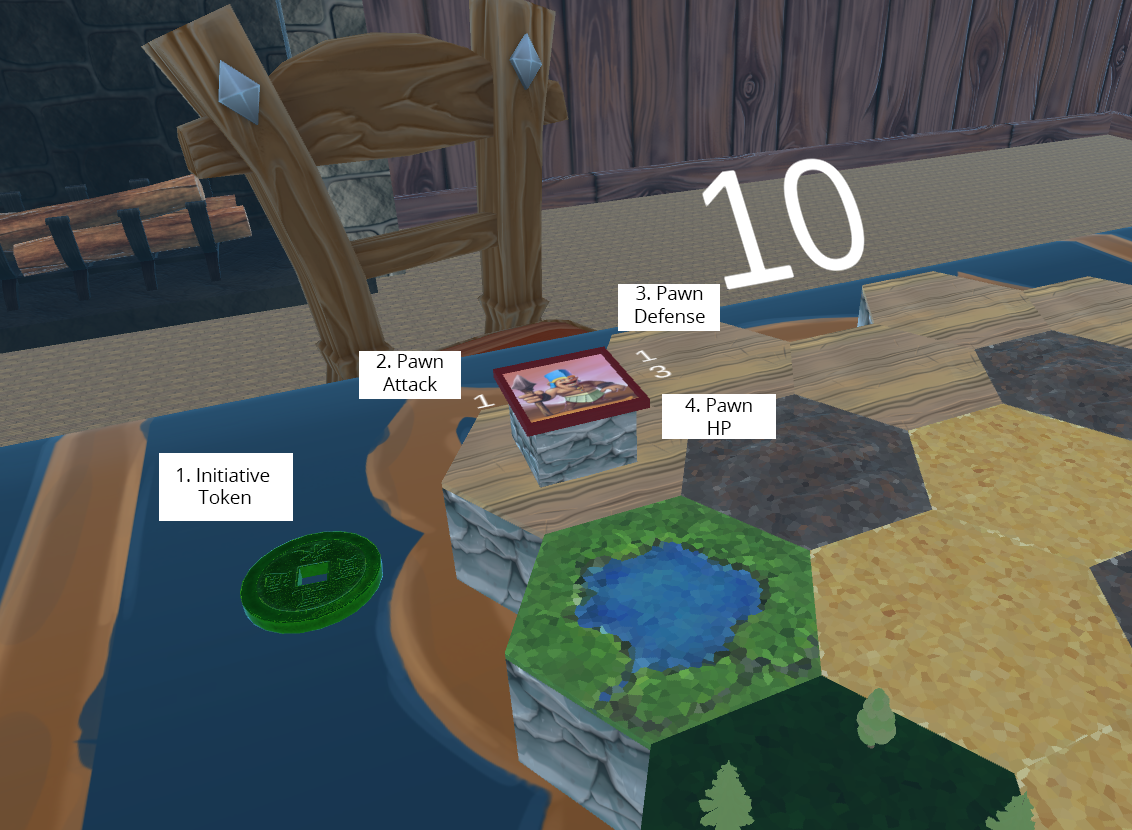
<style>
.page{position:relative;width:1132px;height:830px}
.page>*{position:absolute;margin:0}
.t1{font:18.7px "OpenSans";color:#000000}
</style>
<div class="page">
<p class="t1" style="left:635px;top:286px;width:70px;height:37px;text-align:center">3. Pawn Defense</p>
<p class="t1" style="left:376px;top:354px;width:67px;height:37px;text-align:center">2. Pawn<br>Attack</p>
<p class="t1" style="left:685px;top:398px;width:67px;height:37px;text-align:center">4. Pawn <br>HP</p>
<p class="t1" style="left:177px;top:468px;width:93px;height:36px;text-align:center">1. Initiative <br>Token</p>
</div>
